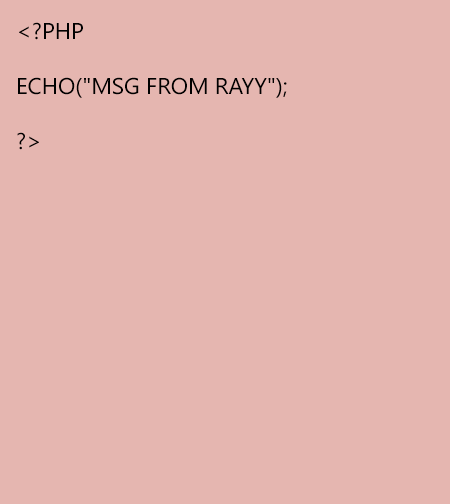
<style>
.page{position:relative;width:450px;height:504px;background:#e5b6b0}
.page>*{position:absolute;margin:0}
.t1{font:22.9px "NirmalaUI";color:#000000;text-transform:uppercase}
</style>
<div class="page">
<p class="t1" style="left:17px;top:22px;width:270px;height:128px">&lt;?php<br><br>echo("Msg from rayy");<br><br>?&gt;</p>
</div>
